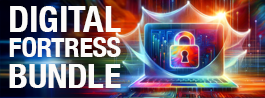
<style>
.page{position:relative;width:265px;height:98px}
.page>*{position:absolute;margin:0}
.t1{font:22.7px/52px "HelveticaNeue-CondensedBold";letter-spacing:-0.01em;color:#fcfbf9;scale:1.05 1}
</style>
<div class="page">
<p class="t1" style="left:9px;top:6px;width:112px;height:82px">DIGITAL<br>FORTRESS<br>BUNDLE</p>
</div>
